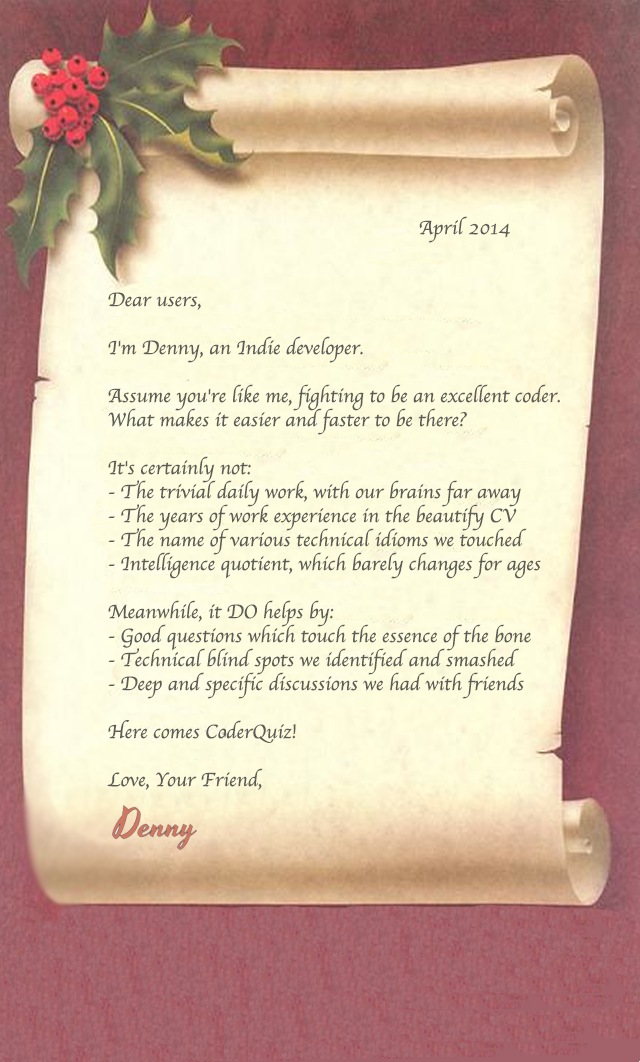
<style>
.page{position:relative;width:640px;height:1062px}
.page>*{position:absolute;margin:0}
.t1{font:20px "Apple-Chancery";color:#5d5c56}
</style>
<div class="page">
<p class="t1" style="left:107px;top:216px;width:453px;height:574px">April 2014<br><br><br>Dear users,<br><br>I'm Denny, an Indie developer.<br><br>Assume you're like me, fighting to be an excellent coder.<br>What makes it easier and faster to be there?<br><br>It's certainly not:<br>- The trivial daily work, with our brains far away<br>- The years of work experience in the beautify CV<br>- The name of various technical idioms we touched<br>- Intelligence quotient, which barely changes for ages<br><br>Meanwhile, it DO helps by:<br>- Good questions which touch the essence of the bone<br>- Technical blind spots we identified and smashed<br>- Deep and specific discussions we had with friends<br><br>Here comes CoderQuiz!<br><br>Love, Your Friend,</p>
</div>
